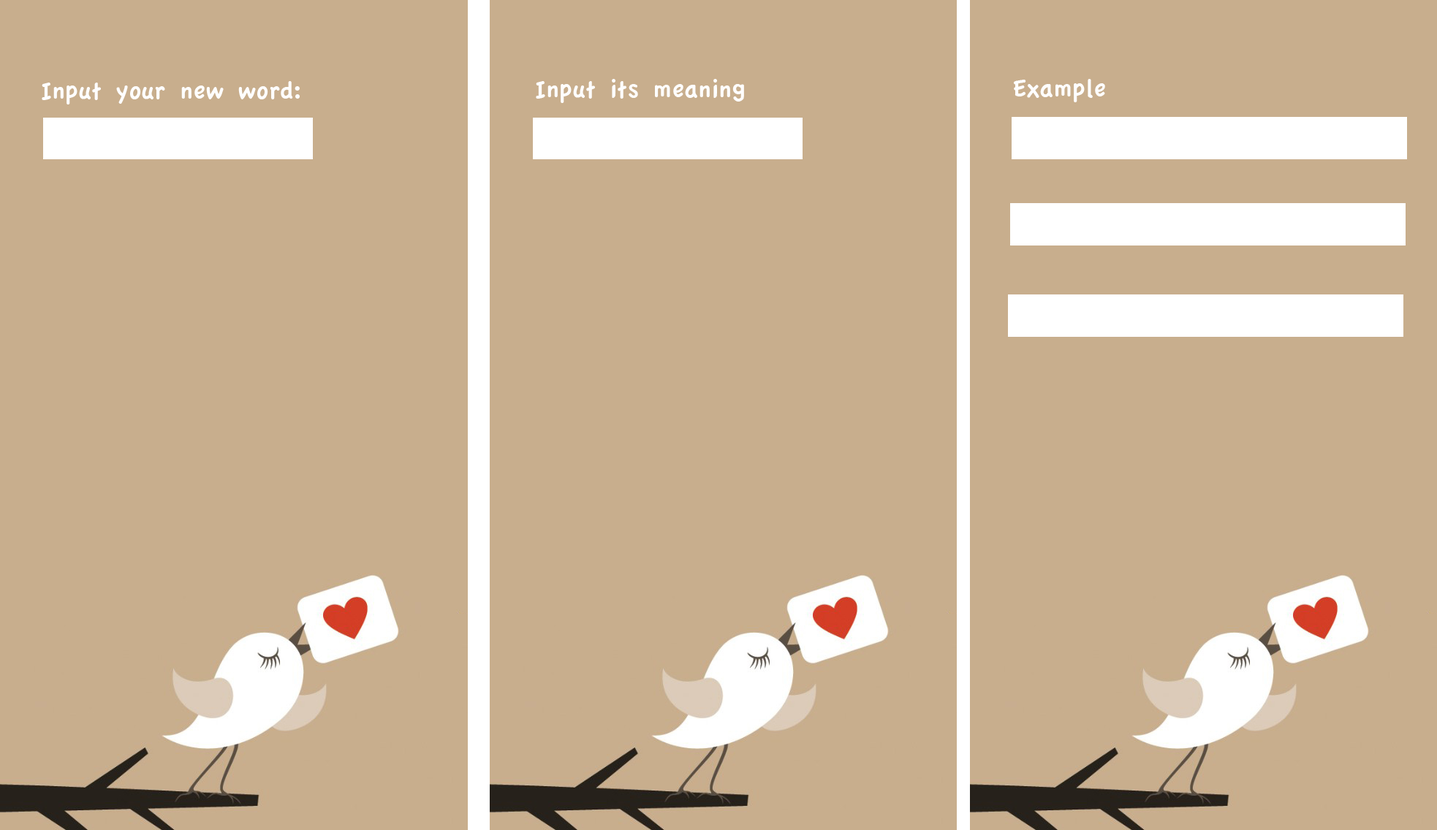
<style>
.page{position:relative;width:1437px;height:830px;background:#c8ae8d}
.page>*{position:absolute;margin:0}
.t1{font:26.3px "AppleCasual";color:#fefefe}
</style>
<div class="page">
<p class="t1" style="left:42px;top:81px;width:258px;height:23px">Input your new word:</p>
<p class="t1" style="left:536px;top:79px;width:208px;height:24px">Input its meaning</p>
<p class="t1" style="left:1013px;top:79px;width:92px;height:23px">Example</p>
</div>
